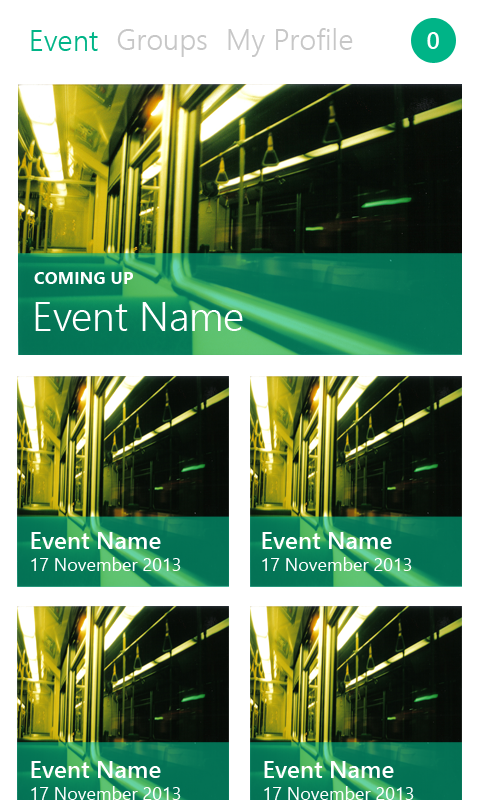
<style>
.page{position:relative;width:480px;height:800px;background:#ffffff}
.page>*{position:absolute;margin:0}
.t1{font:29.4px "SegoeUI-Semilight";color:#00b487}
.t2{font:29.4px "SegoeUI-Semilight";color:#c7c7c7}
.t3{font:24px "SegoeUI-Semibold";color:#ffffff}
.t4{font:17.3px "SegoeUI-Bold";color:#ffffff}
.t5{font:40.7px "SegoeUI-Semilight";color:#ffffff}
.t6{font:18px "SegoeUI";color:#ffffff}
</style>
<div class="page">
<p class="t1" style="left:31px;top:30px;width:67px;height:21px">Event</p>
<p class="t2" style="left:117px;top:29px;width:90px;height:28px">Groups</p>
<p class="t2" style="left:228px;top:28px;width:125px;height:29px">My Profile</p>
<p class="t3" style="left:427px;top:32px;width:12px;height:17px">0</p>
<p class="t4" style="left:34px;top:272px;width:99px;height:12px">COMING UP</p>
<p class="t5" style="left:35px;top:302px;width:208px;height:29px">Event Name</p>
<p class="t6" style="left:31px;top:532px;width:150px;height:39px"><span class="t3">Event Name<br></span>17 November 2013</p>
<p class="t6" style="left:262px;top:532px;width:150px;height:39px"><span class="t3">Event Name<br></span>17 November 2013</p>
<p class="t6" style="left:31px;top:761px;width:150px;height:39px"><span class="t3">Event Name<br></span>17 November 2013</p>
<p class="t6" style="left:264px;top:761px;width:150px;height:39px"><span class="t3">Event Name<br></span>17 November 2013</p>
</div>
